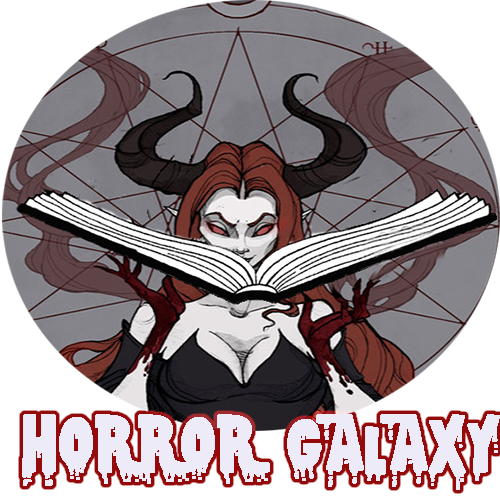
<style>
.page{position:relative;width:500px;height:500px;background:#ffffff}
.page>*{position:absolute;margin:0}
.t1{font:72px "CSNPWDTNFI";color:#eeebf9;font-weight:bold}
</style>
<div class="page">
<p class="t1" style="left:22px;top:414px;width:478px;height:76px">Horror Galaxy</p>
</div>
